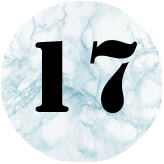
<style>
.page{position:relative;width:164px;height:164px;background:#ffffff}
.page>*{position:absolute;margin:0}
.t1{font:95.5px "StencilStd";color:#000000}
</style>
<div class="page">
<p class="t1" style="left:35px;top:40px;width:102px;height:73px">17</p>
</div>
